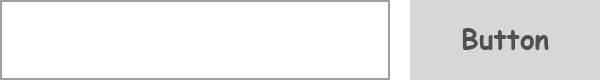
<style>
.page{position:relative;width:600px;height:80px;background:#ffffff}
.page>*{position:absolute;margin:0}
.t1{font:28px "ComicSansMS-Bold";color:#505050}
</style>
<div class="page">
<p class="t1" style="left:462px;top:28px;width:87px;height:22px">Button</p>
</div>
